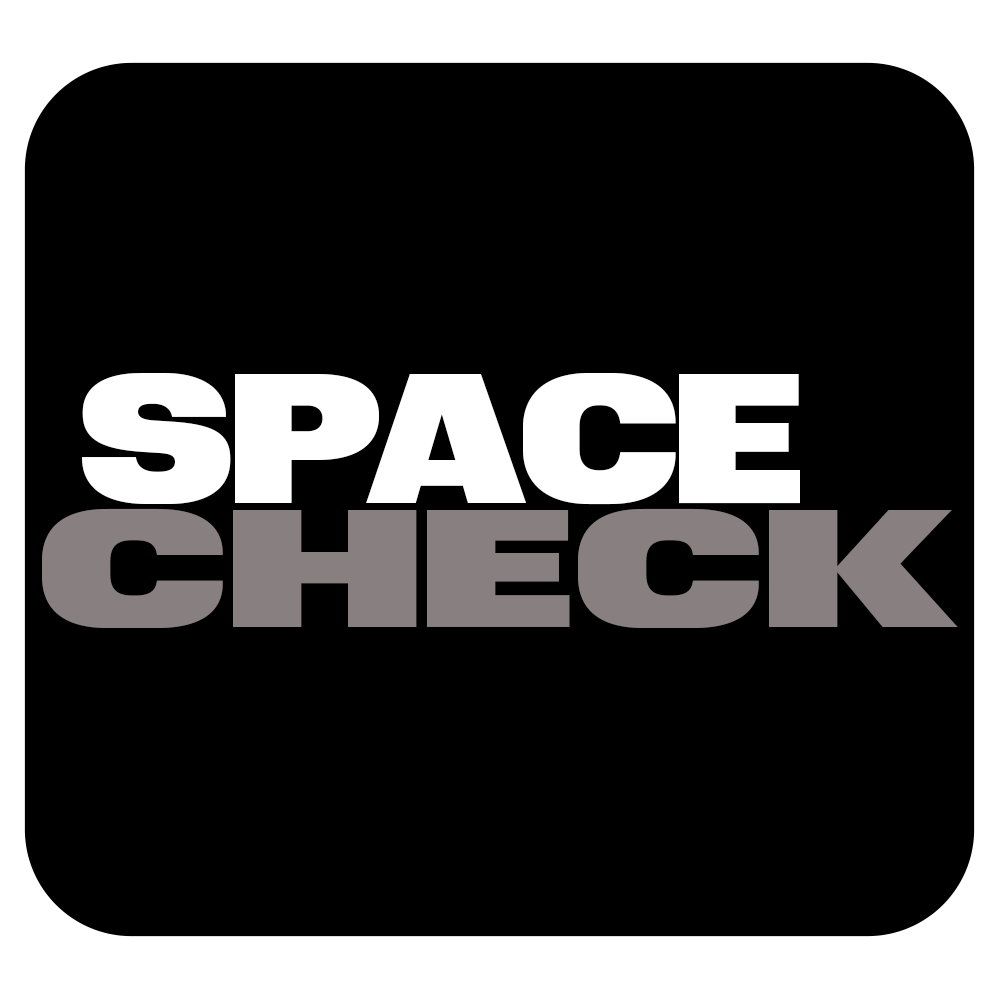
<style>
.page{position:relative;width:1000px;height:1000px;background:#000000}
.page>*{position:absolute;margin:0}
.t1{font:179.2px "TempelGrotesk-Normal";color:#ffffff}
.t2{font:162.5px "TempelGrotesk-Wide";letter-spacing:0.04em;color:#888080}
</style>
<div class="page">
<p class="t1" style="left:82px;top:373px;width:718px;height:132px">SPACE</p>
<p class="t2" style="left:42px;top:508px;width:916px;height:120px">CHECK</p>
</div>
